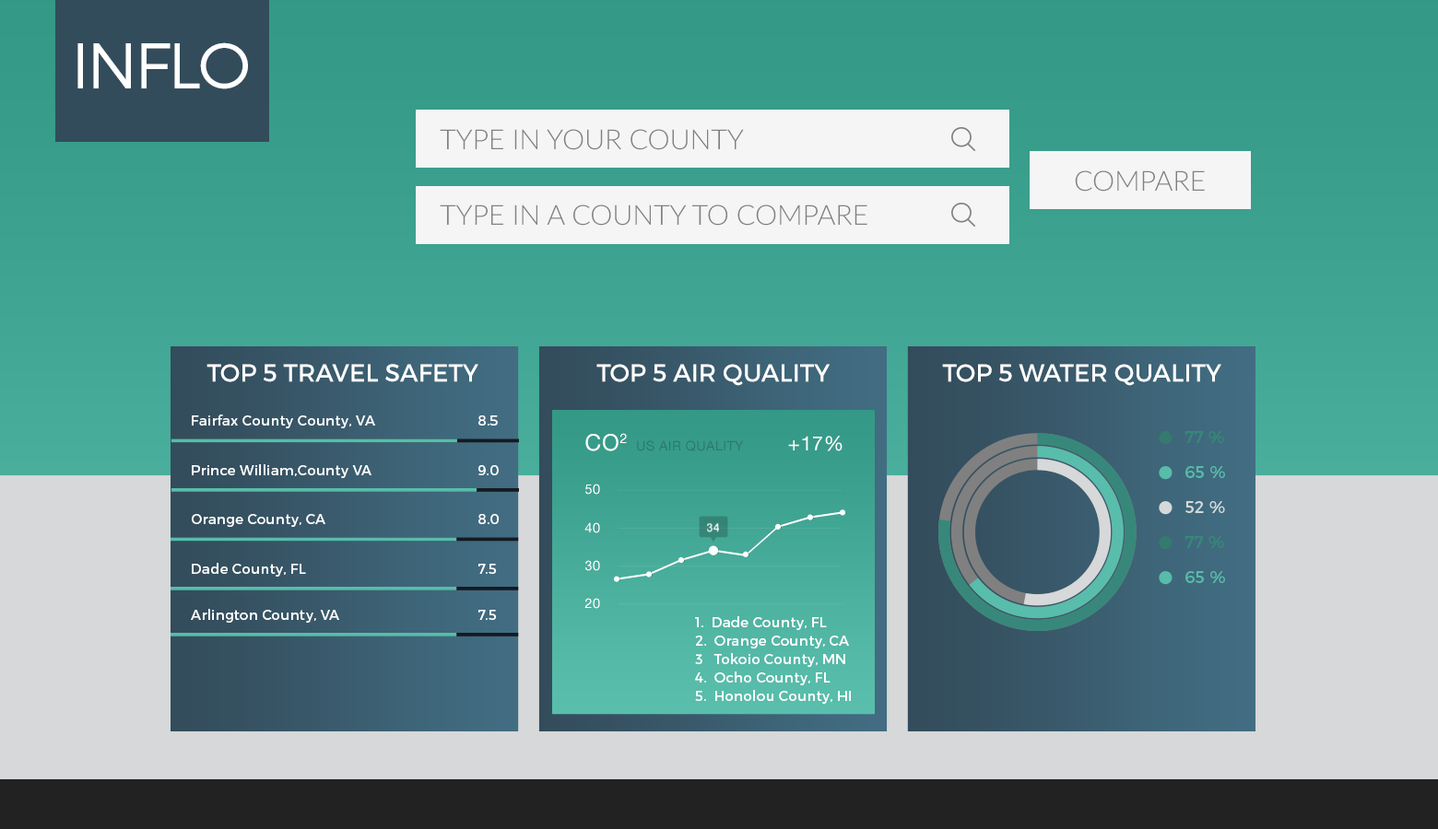
<style>
.page{position:relative;width:1438px;height:829px}
.page>*{position:absolute;margin:0}
.t1{font:64.4px "Montserrat-Light";letter-spacing:-0.05em;color:#fefefe}
.t2{font:27.6px "Lato-Light";letter-spacing:-0.005em;color:#808080;text-transform:uppercase}
.t3{font:24.5px "Montserrat-Regular";color:#ffffff;text-transform:uppercase}
.t4{font:13.9px "Montserrat-Regular";letter-spacing:0.025em;color:#ffffff}
.t5{font:22.8px "HelveticaNeue";letter-spacing:0.03em;color:#ffffff}
.t6{font:20px "HelveticaNeue";letter-spacing:0.03em;color:#ffffff}
.t7{font:16.5px "Montserrat-Regular";letter-spacing:0.025em;color:#37887a}
.t8{font:13.3px "HelveticaNeue";letter-spacing:0.03em;color:#2a7a6b}
.t9{font:16.5px "Montserrat-Regular";letter-spacing:0.025em;color:#57bcaa}
.t10{font:13.3px "HelveticaNeue";letter-spacing:0.03em;color:#ffffff}
.t11{font:16.5px "Montserrat-Regular";letter-spacing:0.025em;color:#d6d8d9}
.t12{font:11.4px "HelveticaNeue-Medium";letter-spacing:0.03em;color:#ffffff}
.t13{font:13.9px/18.4px "Montserrat-Regular";letter-spacing:0.025em;color:#ffffff}
</style>
<div class="page">
<p class="t1" style="left:77px;top:42px;width:171px;height:47px">INFLO</p>
<p class="t2" style="left:440px;top:129px;width:304px;height:21px">type in your county</p>
<p class="t2" style="left:1075px;top:170px;width:130px;height:22px">compare</p>
<p class="t2" style="left:440px;top:205px;width:427px;height:21px">type in a county to compare</p>
<p class="t3" style="left:206px;top:364px;width:272px;height:18px">top 5 travel safety</p>
<p class="t3" style="left:596px;top:364px;width:233px;height:22px">top 5 AIR QUALITY</p>
<p class="t3" style="left:942px;top:364px;width:279px;height:22px">top 5 Water quality</p>
<p class="t4" style="left:192px;top:415px;width:183px;height:14px">Fairfax County County, VA</p>
<p class="t4" style="left:478px;top:416px;width:20px;height:10px">8.5</p>
<p class="t5" style="left:585px;top:433px;width:42px;height:19px">CO2</p>
<p class="t6" style="left:788px;top:436px;width:54px;height:16px">+17%</p>
<p class="t7" style="left:1184px;top:431px;width:40px;height:12px">77 %</p>
<p class="t8" style="left:637px;top:441px;width:107px;height:11px">US AIR QUALITY</p>
<p class="t4" style="left:192px;top:464px;width:179px;height:14px">Prince William,County VA</p>
<p class="t4" style="left:478px;top:465px;width:21px;height:11px">9.0</p>
<p class="t9" style="left:1185px;top:466px;width:40px;height:12px">65 %</p>
<p class="t10" style="left:585px;top:484px;width:15px;height:11px">50</p>
<p class="t11" style="left:1185px;top:501px;width:40px;height:12px">52 %</p>
<p class="t4" style="left:192px;top:514px;width:133px;height:13px">Orange County, CA</p>
<p class="t4" style="left:478px;top:514px;width:21px;height:10px">8.0</p>
<p class="t10" style="left:584px;top:523px;width:16px;height:11px">40</p>
<p class="t12" style="left:707px;top:523px;width:12px;height:10px">34</p>
<p class="t7" style="left:1184px;top:536px;width:40px;height:12px">77 %</p>
<p class="t4" style="left:192px;top:563px;width:114px;height:14px">Dade County, FL</p>
<p class="t4" style="left:478px;top:564px;width:18px;height:10px">7.5</p>
<p class="t10" style="left:585px;top:560px;width:15px;height:11px">30</p>
<p class="t9" style="left:1185px;top:571px;width:40px;height:12px">65 %</p>
<p class="t10" style="left:584px;top:598px;width:16px;height:11px">20</p>
<p class="t4" style="left:191px;top:609px;width:148px;height:14px">Arlington County, VA</p>
<p class="t4" style="left:478px;top:610px;width:18px;height:10px">7.5</p>
<p class="t13" style="left:695px;top:617px;width:156px;height:87px">1.  Dade County, FL<br>2.  Orange County, CA<br>3   Tokoio County, MN<br>4.  Ocho County, FL<br>5.  Honolou County, HI</p>
</div>
